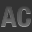
<style>
.page{position:relative;width:32px;height:32px;background:#333333}
.page>*{position:absolute;margin:0}
.t1{font:28px "HelveticaNeue-CondensedBold";color:#5b5b5b}
</style>
<div class="page">
<p class="t1" style="left:1px;top:6px;width:30px;height:20px">AC</p>
</div>
